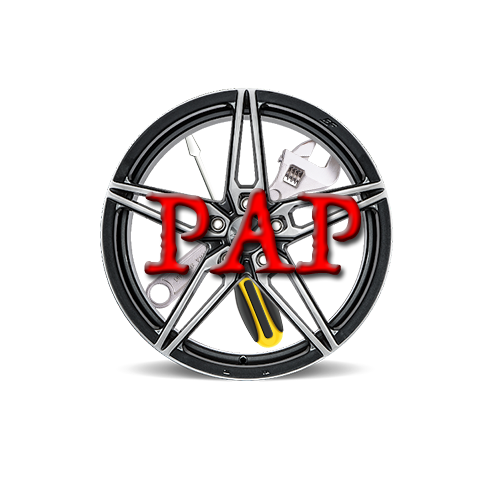
<style>
.page{position:relative;width:500px;height:500px;background:#ffffff}
.page>*{position:absolute;margin:0}
.t1{font:144px "Trattatello"}
</style>
<div class="page">
<p class="t1" style="left:144px;top:188px;width:217px;height:87px">PAP</p>
</div>
